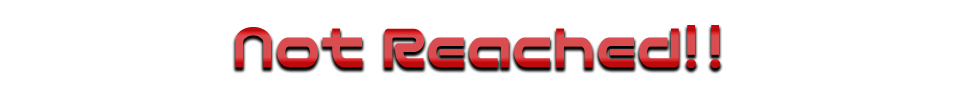
<style>
.page{position:relative;width:956px;height:92px;background:#ffffff}
.page>*{position:absolute;margin:0}
.t1{font:66.3px "NicoKaku";scale:0.86 1}
</style>
<div class="page">
<p class="t1" style="left:235px;top:25px;width:485px;height:43px">Not Reached!!</p>
</div>
